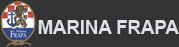
<style>
.page{position:relative;width:179px;height:47px;background:#333333}
.page>*{position:absolute;margin:0}
.t1{font:18.5px "Arial-BoldMT";color:#dbe2e6}
</style>
<div class="page">
<p class="t1" style="left:38px;top:20px;width:141px;height:14px">MARINA FRAPA</p>
</div>
